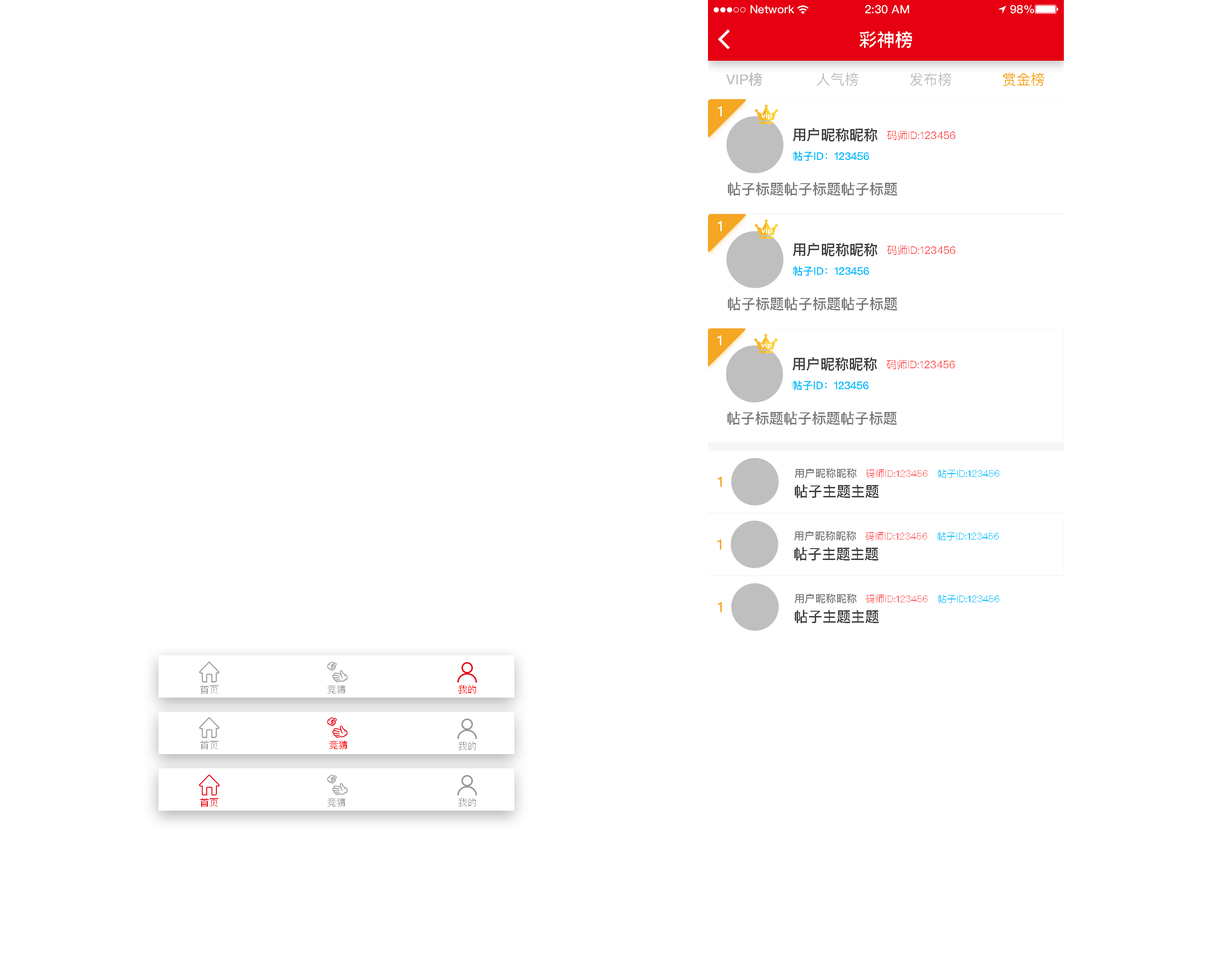
<style>
.page{position:relative;width:1229px;height:971px;background:#ffffff}
.page>*{position:absolute;margin:0}
.t1{font:18px "PingFangSC-Medium";color:#ffffff;text-transform:uppercase}
.t2{font:14.2px "PingFangSC-Medium";color:#bfbfbf;text-transform:uppercase}
.t3{font:14.2px "PingFangSC-Regular";color:#bfbfbf;text-transform:uppercase}
.t4{font:14.2px "PingFangSC-Regular";color:#f6a623;text-transform:uppercase}
.t5{font:14.2px "PingFangSC-Medium";color:#ffffff;text-transform:uppercase}
.t6{font:14.2px "PingFangSC-Medium";color:#434343;text-transform:uppercase}
.t7{font:10.4px "PingFangSC-Regular";color:#ff5858;text-transform:uppercase}
.t8{font:10.4px "PingFangSC-Medium";color:#01b9fd;text-transform:uppercase}
.t9{font:14.2px "PingFangSC-Medium";color:#7d7d7d;text-transform:uppercase}
.t10{font:10.4px "PingFangSC-Medium";color:#7d7d7d;text-transform:uppercase}
.t11{font:9.5px "PingFangSC-Regular";color:#ff5858;text-transform:uppercase}
.t12{font:9.5px "PingFangSC-Regular";color:#01b9fd;text-transform:uppercase}
.t13{font:14.2px "PingFangSC-Medium";color:#f6a623;text-transform:uppercase}
.t14{font:9.5px "PingFangSC-Regular";color:#a0a0a0;text-transform:uppercase}
.t15{font:9.5px "PingFangSC-Regular";color:#959595;text-transform:uppercase}
.t16{font:9.5px "PingFangSC-Regular";color:#ff0000;text-transform:uppercase}
.t17{font:9.5px "PingFangSC-Regular";color:#e60012;text-transform:uppercase}
</style>
<div class="page">
<p class="t1" style="left:859px;top:31px;width:53px;height:17px">彩神榜</p>
<p class="t2" style="left:726px;top:73px;width:35px;height:13px">vip榜</p>
<p class="t3" style="left:816px;top:73px;width:42px;height:13px">人气榜</p>
<p class="t3" style="left:909px;top:73px;width:42px;height:13px">发布榜</p>
<p class="t4" style="left:1003px;top:73px;width:41px;height:13px">赏金榜</p>
<p class="t5" style="left:718px;top:106px;width:4px;height:10px">1</p>
<p class="t6" style="left:793px;top:128px;width:84px;height:13px">用户昵称昵称</p>
<p class="t7" style="left:887px;top:130px;width:68px;height:10px">码师id:123456</p>
<p class="t8" style="left:793px;top:151px;width:76px;height:10px">帖子id：123456</p>
<p class="t9" style="left:728px;top:182px;width:169px;height:13px">帖子标题帖子标题帖子标题</p>
<p class="t5" style="left:718px;top:221px;width:4px;height:10px">1</p>
<p class="t6" style="left:793px;top:243px;width:84px;height:13px">用户昵称昵称</p>
<p class="t7" style="left:887px;top:245px;width:68px;height:10px">码师id:123456</p>
<p class="t8" style="left:793px;top:266px;width:76px;height:10px">帖子id：123456</p>
<p class="t9" style="left:728px;top:297px;width:169px;height:13px">帖子标题帖子标题帖子标题</p>
<p class="t5" style="left:717px;top:335px;width:4px;height:10px">1</p>
<p class="t6" style="left:792px;top:357px;width:85px;height:13px">用户昵称昵称</p>
<p class="t7" style="left:887px;top:360px;width:67px;height:9px">码师id:123456</p>
<p class="t8" style="left:793px;top:380px;width:75px;height:10px">帖子id：123456</p>
<p class="t9" style="left:727px;top:411px;width:170px;height:14px">帖子标题帖子标题帖子标题</p>
<p class="t10" style="left:795px;top:468px;width:61px;height:10px">用户昵称昵称</p>
<p class="t11" style="left:866px;top:469px;width:61px;height:9px">码师id:123456</p>
<p class="t12" style="left:938px;top:469px;width:61px;height:9px">帖子id:123456</p>
<p class="t13" style="left:718px;top:477px;width:4px;height:10px">1</p>
<p class="t6" style="left:795px;top:484px;width:84px;height:14px">帖子主题主题</p>
<p class="t10" style="left:794px;top:531px;width:62px;height:9px">用户昵称昵称</p>
<p class="t11" style="left:865px;top:532px;width:62px;height:8px">码师id:123456</p>
<p class="t12" style="left:937px;top:532px;width:62px;height:8px">帖子id:123456</p>
<p class="t13" style="left:717px;top:539px;width:4px;height:10px">1</p>
<p class="t6" style="left:794px;top:547px;width:84px;height:13px">帖子主题主题</p>
<p class="t10" style="left:795px;top:593px;width:61px;height:10px">用户昵称昵称</p>
<p class="t13" style="left:718px;top:602px;width:4px;height:10px">1</p>
<p class="t11" style="left:866px;top:594px;width:61px;height:9px">码师id:123456</p>
<p class="t12" style="left:938px;top:594px;width:61px;height:9px">帖子id:123456</p>
<p class="t6" style="left:795px;top:610px;width:84px;height:13px">帖子主题主题</p>
<p class="t14" style="left:200px;top:685px;width:18px;height:9px">首页</p>
<p class="t15" style="left:327px;top:685px;width:18px;height:9px">竞猜</p>
<p class="t16" style="left:458px;top:685px;width:18px;height:9px">我的</p>
<p class="t14" style="left:200px;top:740px;width:18px;height:9px">首页</p>
<p class="t16" style="left:329px;top:740px;width:18px;height:9px">竞猜</p>
<p class="t15" style="left:458px;top:741px;width:18px;height:9px">我的</p>
<p class="t17" style="left:200px;top:798px;width:18px;height:8px">首页</p>
<p class="t15" style="left:327px;top:797px;width:18px;height:9px">竞猜</p>
<p class="t15" style="left:458px;top:797px;width:18px;height:9px">我的</p>
</div>
